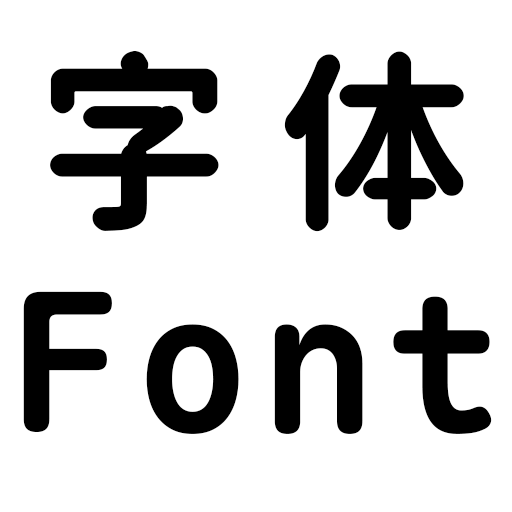
<style>
.page{position:relative;width:512px;height:512px;background:#ffffff}
.page>*{position:absolute;margin:0}
.t1{font:192px "MapleMono-CN-Bold";letter-spacing:0.056em;color:#000000}
</style>
<div class="page">
<p class="t1" style="left:50px;top:50px;width:414px;height:182px">字体</p>
<p class="t1" style="left:23px;top:291px;width:469px;height:143px">Font</p>
</div>
